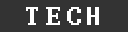
<style>
.page{position:relative;width:128px;height:32px;background:#333333}
.page>*{position:absolute;margin:0}
.t1{font:30.8px "Terminal_Hex";color:#ffffff}
</style>
<div class="page">
<p class="t1" style="left:26px;top:7px;width:73px;height:18px">TECH</p>
</div>
